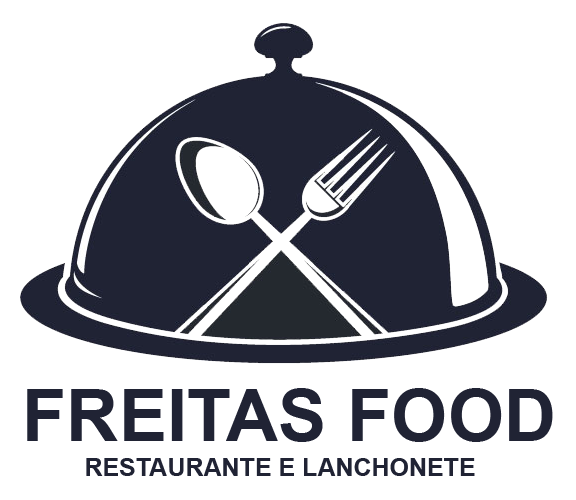
<style>
.page{position:relative;width:576px;height:500px;background:#ffffff}
.page>*{position:absolute;margin:0}
.t1{font:72.5px "Arial-BoldMT";color:#202334}
.t2{font:25px "Arial-BoldMT";color:#202334}
</style>
<div class="page">
<p class="t1" style="left:27px;top:388px;width:526px;height:54px">FREITAS FOOD</p>
<p class="t2" style="left:86px;top:458px;width:389px;height:18px">RESTAURANTE E LANCHONETE</p>
</div>
